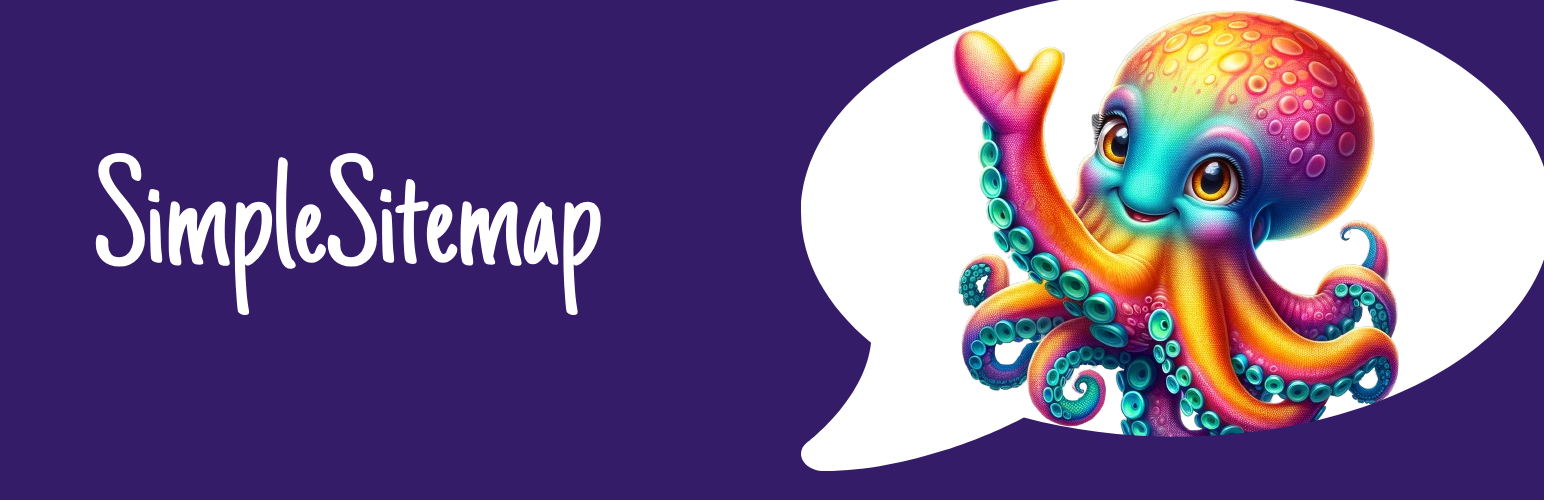
<style>
.page{position:relative;width:1544px;height:500px;background:#341c69}
.page>*{position:absolute;margin:0}
.t1{font:153.8px "JustAnotherHand-Regular";color:#ffffff}
</style>
<div class="page">
<p class="t1" style="left:95px;top:153px;width:506px;height:162px">SimpleSitemap</p>
</div>
